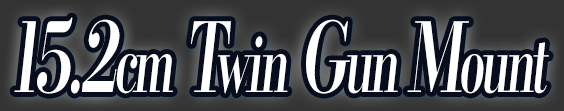
<style>
.page{position:relative;width:564px;height:111px;background:#070d1d}
.page>*{position:absolute;margin:0}
.t1{font:96px "KochoStd-Heavy";letter-spacing:-0.08em;color:#ffffff;font-style:italic;scale:0.62 1}
.t2{font:76.8px "KochoStd-Heavy";letter-spacing:-0.08em;color:#ffffff;font-style:italic;scale:0.62 1}
</style>
<div class="page">
<p class="t1" style="left:14px;top:17px;width:535px;height:77px">15.2<span class="t2">cm</span> T<span class="t2">win</span> G<span class="t2">un </span>M<span class="t2">ount</span></p>
</div>
